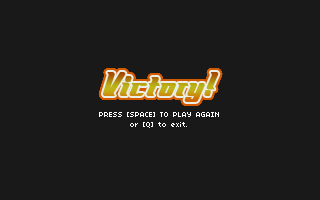
<style>
.page{position:relative;width:320px;height:200px;background:#191919}
.page>*{position:absolute;margin:0}
.t1{font:36px "FlyboyBB";color:#bea013}
.t2{font:8px "04b03";color:#ffffff}
</style>
<div class="page">
<p class="t1" style="left:102px;top:72px;width:117px;height:30px">Victory!</p>
<p class="t2" style="left:99px;top:112px;width:120px;height:16px;text-align:center">PRESS [SPACE] TO PLAY AGAIN<br>or [Q] to exit.</p>
</div>
